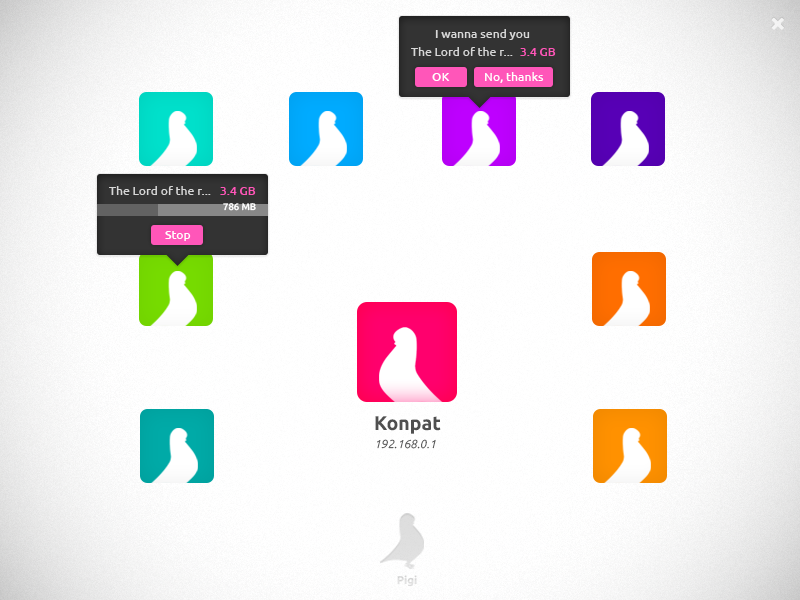
<style>
.page{position:relative;width:800px;height:600px;background:#ffffff}
.page>*{position:absolute;margin:0}
.t1{font:12px "Ubuntu-Medium";color:#d8d8d8}
.t2{font:12px "Ubuntu-Medium";color:#d7d7d7}
.t3{font:12px "Ubuntu-Medium";color:#ff56b9}
.t4{font:12px "Ubuntu-Medium";color:#ffffff}
.t5{font:9.5px "Ubuntu-Medium";color:#ffffff}
.t6{font:19.7px "Ubuntu-Bold";color:#4f4f4f}
.t7{font:11.5px "Ubuntu-LightItalic";color:#4f4f4f}
.t8{font:11.3px "Ubuntu-Bold";color:#dfdfdf}
</style>
<div class="page">
<p class="t1" style="left:435px;top:29px;width:95px;height:11px">I wanna send you</p>
<p class="t2" style="left:411px;top:47px;width:102px;height:9px">The Lord of the r...</p>
<p class="t3" style="left:520px;top:48px;width:36px;height:8px">3.4 GB</p>
<p class="t4" style="left:432px;top:73px;width:18px;height:8px">OK</p>
<p class="t4" style="left:485px;top:72px;width:59px;height:11px">No, thanks</p>
<p class="t2" style="left:109px;top:186px;width:102px;height:9px">The Lord of the r...</p>
<p class="t3" style="left:220px;top:187px;width:36px;height:8px">3.4 GB</p>
<p class="t5" style="left:223px;top:203px;width:33px;height:8px">786 MB</p>
<p class="t4" style="left:165px;top:231px;width:26px;height:10px">Stop</p>
<p class="t6" style="left:375px;top:416px;width:66px;height:18px">Konpat</p>
<p class="t7" style="left:377px;top:439px;width:59px;height:10px">192.168.0.1</p>
<p class="t8" style="left:397px;top:575px;width:20px;height:12px">Pigi</p>
</div>
